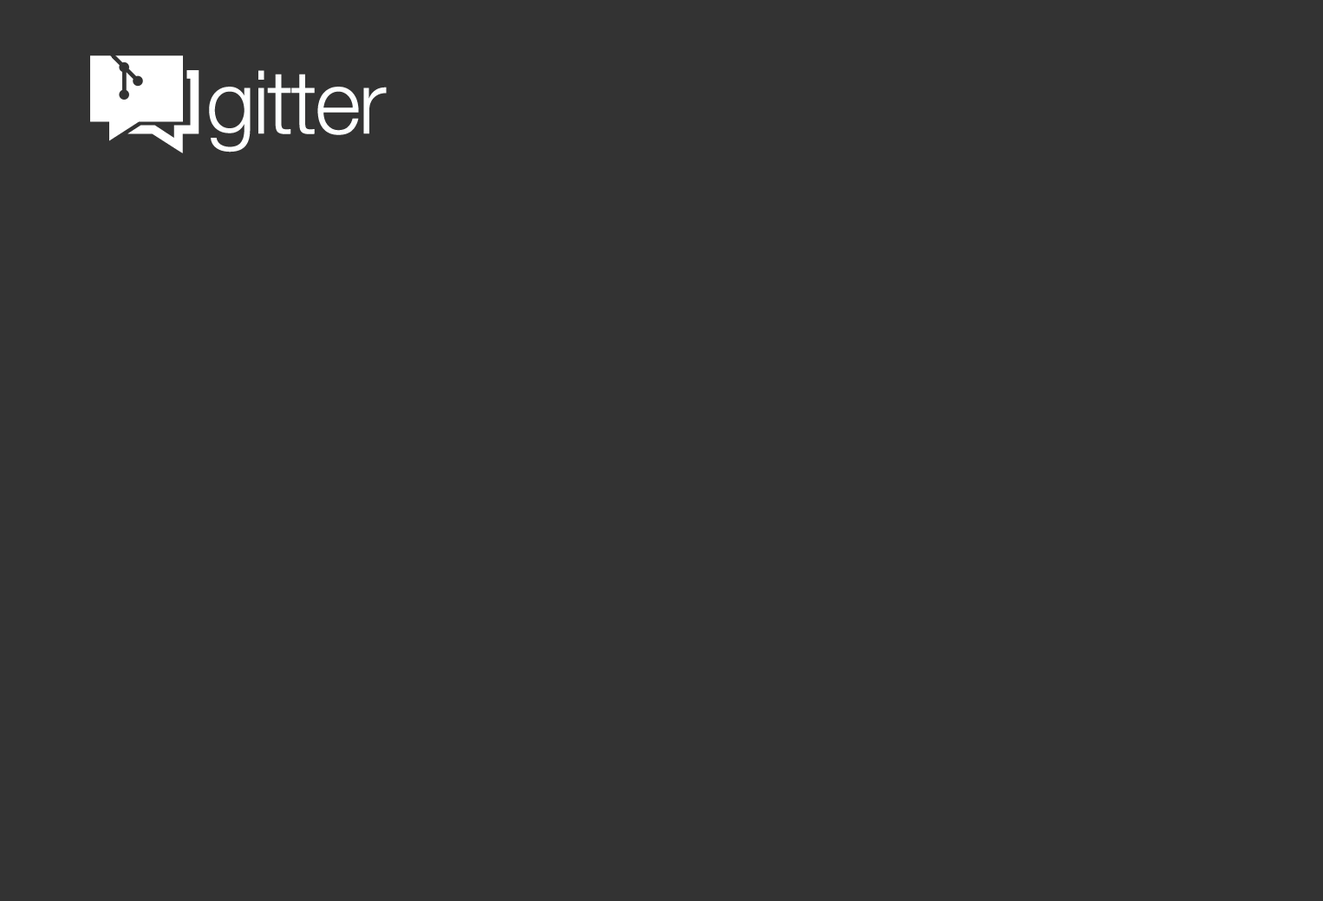
<style>
.page{position:relative;width:1323px;height:901px;background:#333333}
.page>*{position:absolute;margin:0}
.t1{font:88.1px "HelveticaNeue-Light";letter-spacing:-0.025em;color:#fdffff}
</style>
<div class="page">
<p class="t1" style="left:209px;top:70px;width:178px;height:83px">gitter</p>
</div>
